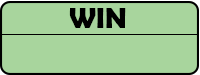
<style>
.page{position:relative;width:200px;height:75px;background:#a8d59d}
.page>*{position:absolute;margin:0}
.t1{font:29.2px "BerlinSansFBDemi-Bold";color:#000000}
</style>
<div class="page">
<p class="t1" style="left:69px;top:8px;width:57px;height:20px">WIN</p>
</div>
